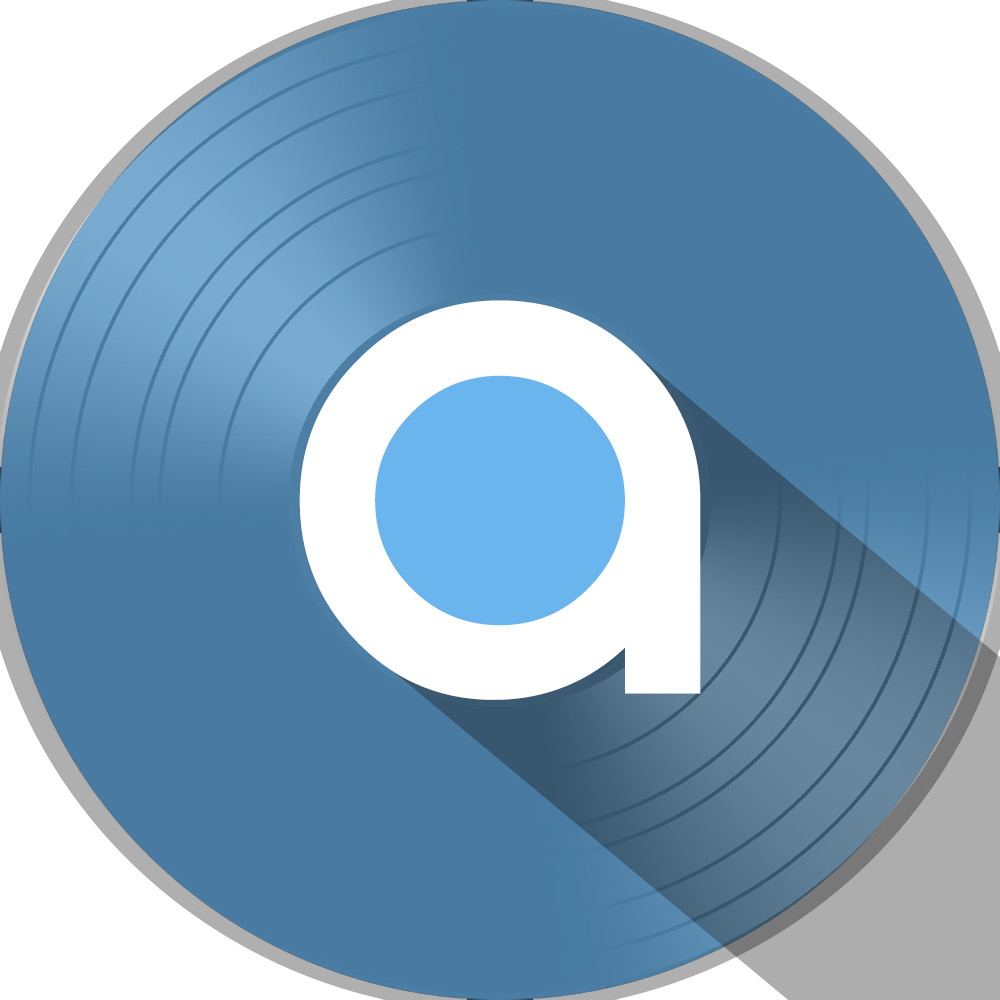
<style>
.page{position:relative;width:1000px;height:1000px;background:#497ba2}
.page>*{position:absolute;margin:0}
.t1{font:750px "SFNewRepublic-Bold";letter-spacing:-0.075em;color:#ffffff}
</style>
<div class="page">
<p class="t1" style="left:299px;top:300px;width:402px;height:400px">a</p>
</div>
